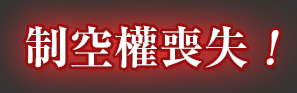
<style>
.page{position:relative;width:297px;height:93px}
.page>*{position:absolute;margin:0}
.t1{font:45px "RyuminPr6N-ExBold";color:#ffffff}
.t2{font:45px "RyuminPr6N-ExBold";color:#ffffff;font-style:italic}
</style>
<div class="page">
<p class="t1" style="left:25px;top:25px;width:254px;height:43px">制空權喪失 <span class="t2">!</span></p>
</div>
